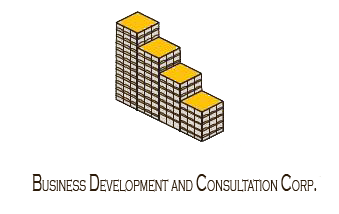
<style>
.page{position:relative;width:339px;height:214px;background:#ffffff}
.page>*{position:absolute;margin:0}
.t1{font:24px "CopperplateGothic-Light";letter-spacing:-0.02em;color:#2b1a08;font-variant:small-caps;scale:0.55 1}
</style>
<div class="page">
<p class="t1" style="left:32px;top:174px;width:285px;height:18px">Business Development and Consultation Corp.</p>
</div>
